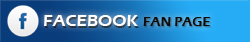
<style>
.page{position:relative;width:250px;height:42px}
.page>*{position:absolute;margin:0}
.t1{font:17px "ErasITC-Demi";color:#ffffff}
.t2{font:13.3px "ErasITC-Demi";color:#0c0c0c}
</style>
<div class="page">
<p class="t1" style="left:44px;top:15px;width:94px;height:11px">FACEBOOK</p>
<p class="t2" style="left:143px;top:17px;width:67px;height:9px">FAN PAGE</p>
</div>
